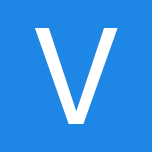
<style>
.page{position:relative;width:152px;height:152px;background:#1e87e6}
.page>*{position:absolute;margin:0}
.t1{font:134.5px "HelveticaNeue";color:#ffffff}
</style>
<div class="page">
<p class="t1" style="left:35px;top:28px;width:83px;height:96px">V</p>
</div>
